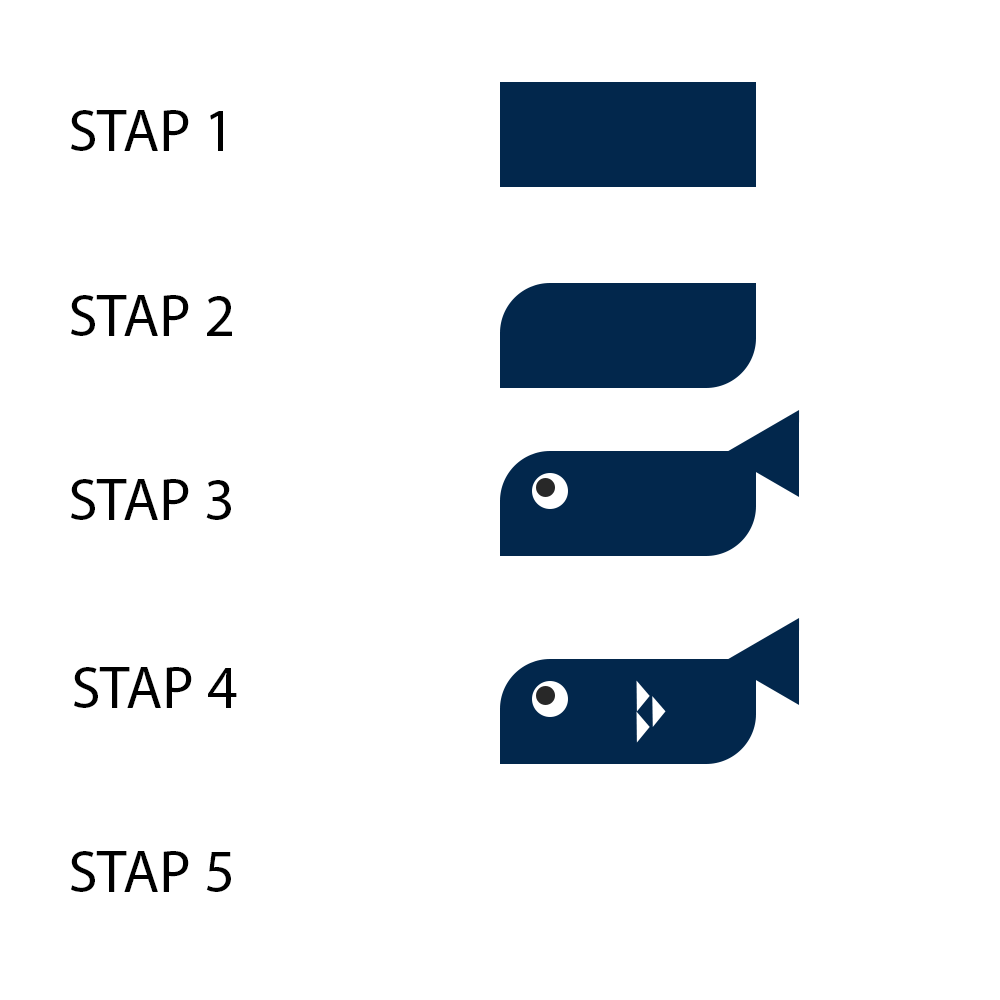
<style>
.page{position:relative;width:1000px;height:1000px;background:#ffffff}
.page>*{position:absolute;margin:0}
.t1{font:60px "MyriadPro-Regular";color:#000000}
</style>
<div class="page">
<p class="t1" style="left:71px;top:110px;width:152px;height:41px">STAP 1</p>
<p class="t1" style="left:71px;top:295px;width:161px;height:41px">STAP 2</p>
<p class="t1" style="left:71px;top:479px;width:160px;height:41px">STAP 3</p>
<p class="t1" style="left:74px;top:667px;width:163px;height:41px">STAP 4</p>
<p class="t1" style="left:71px;top:851px;width:160px;height:41px">STAP 5</p>
</div>
